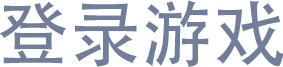
<style>
.page{position:relative;width:283px;height:67px;background:#ffffff}
.page>*{position:absolute;margin:0}
.t1{font:72px "AdobeHeitiStd-Regular";color:#707e9b}
</style>
<div class="page">
<p class="t1" style="left:0px;top:0px;width:284px;height:67px">登录游戏</p>
</div>
